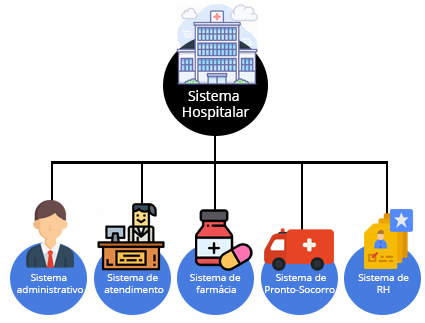
<style>
.page{position:relative;width:425px;height:323px;background:#ffffff}
.page>*{position:absolute;margin:0}
.t1{font:14px "OpenSans";color:#ffffff}
.t2{font:9.9px "OpenSans";color:#ffffff}
</style>
<div class="page">
<p class="t1" style="left:183px;top:90px;width:67px;height:30px;text-align:center">Sistema <br>Hospitalar</p>
<p class="t2" style="left:17px;top:274px;width:67px;height:19px;text-align:center">Sistema<br> administrativo</p>
<p class="t2" style="left:104px;top:274px;width:60px;height:19px;text-align:center">Sistema de<br> atendimento</p>
<p class="t2" style="left:190px;top:274px;width:51px;height:19px;text-align:center">Sistema de<br> farmácia</p>
<p class="t2" style="left:265px;top:274px;width:70px;height:19px;text-align:center">Sistema de<br>Pronto-Socorro</p>
<p class="t2" style="left:358px;top:274px;width:51px;height:19px;text-align:center">Sistema de<br> RH</p>
</div>
